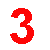
<style>
.page{position:relative;width:50px;height:50px;background:#ffffff}
.page>*{position:absolute;margin:0}
.t1{font:50px "Arial-BoldMT";color:#fd0606}
</style>
<div class="page">
<p class="t1" style="left:10px;top:8px;width:24px;height:36px">3</p>
</div>
